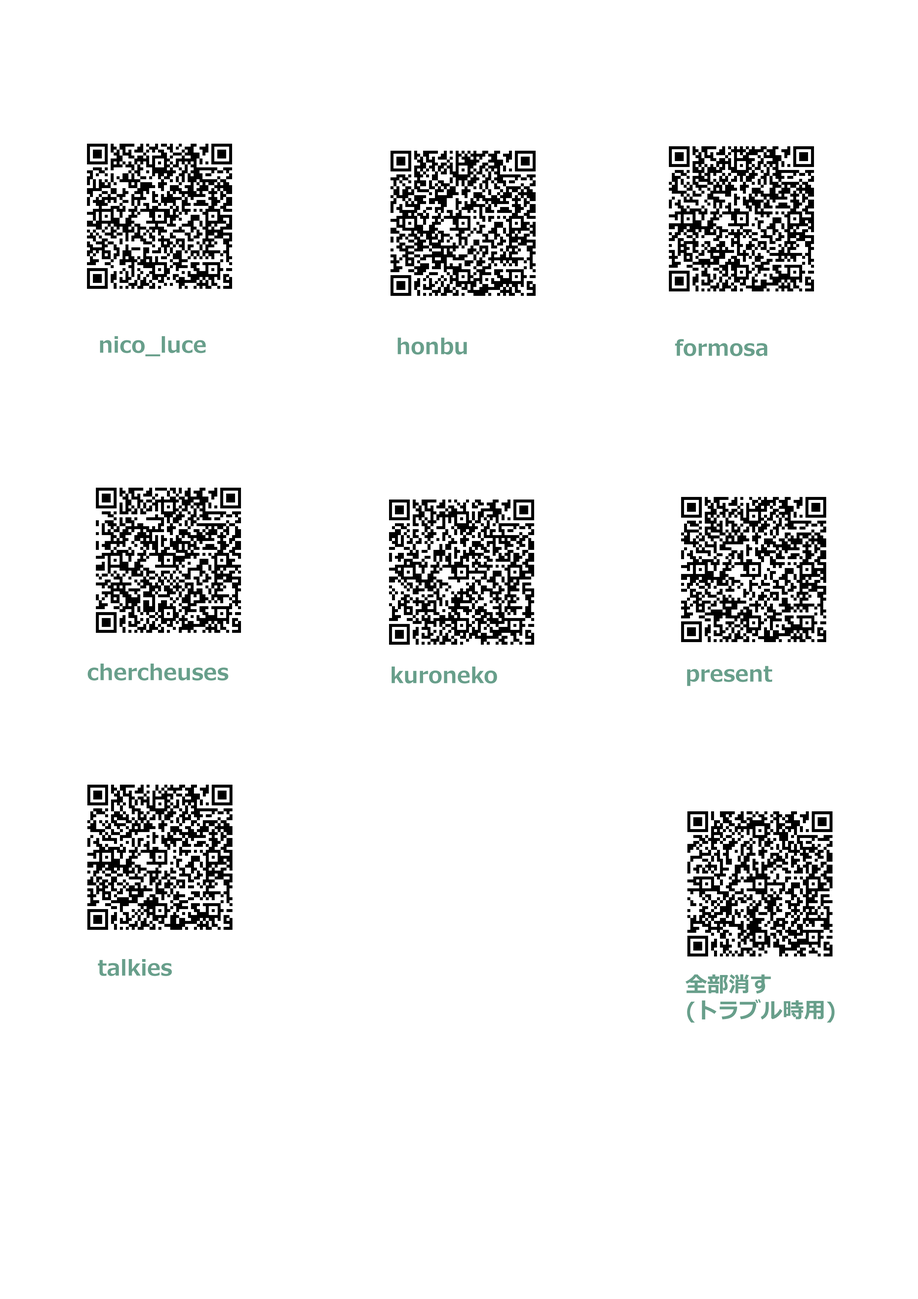
<style>
.page{position:relative;width:918px;height:1299px;background:#ffffff}
.page>*{position:absolute;margin:0}
.t1{font:21.6px "Meiryo-Bold";color:#689f8b}
</style>
<div class="page">
<p class="t1" style="left:100px;top:336px;width:106px;height:21px">nico_luce</p>
<p class="t1" style="left:398px;top:337px;width:69px;height:18px">honbu</p>
<p class="t1" style="left:675px;top:339px;width:92px;height:17px">formosa</p>
<p class="t1" style="left:88px;top:663px;width:140px;height:17px">chercheuses</p>
<p class="t1" style="left:687px;top:666px;width:85px;height:20px">present</p>
<p class="t1" style="left:392px;top:666px;width:105px;height:17px">kuroneko</p>
<p class="t1" style="left:98px;top:959px;width:74px;height:17px">talkies</p>
<p class="t1" style="left:686px;top:974px;width:149px;height:49px">全部消す<br>(トラブル時用)</p>
</div>
